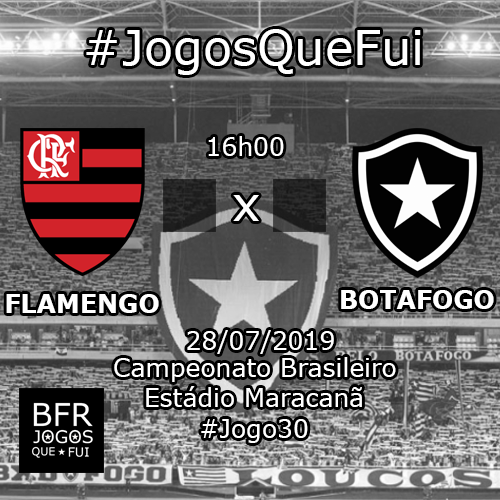
<style>
.page{position:relative;width:500px;height:500px}
.page>*{position:absolute;margin:0}
.t1{font:48px "Verdana";color:#ffffff}
.t2{font:25px "Verdana";color:#ffffff}
.t3{font:25px "Verdana-Bold";color:#ffffff}
</style>
<div class="page">
<p class="t1" style="left:86px;top:29px;width:335px;height:46px">#JogosQueFui</p>
<p class="t2" style="left:208px;top:136px;width:76px;height:20px">16h00</p>
<p class="t1" style="left:233px;top:195px;width:26px;height:26px">x</p>
<p class="t3" style="left:6px;top:294px;width:153px;height:19px">FLAMENGO</p>
<p class="t3" style="left:341px;top:290px;width:153px;height:19px">BOTAFOGO</p>
<p class="t2" style="left:187px;top:330px;width:147px;height:24px">28/07/2019</p>
<p class="t2" style="left:114px;top:357px;width:282px;height:25px">Campeonato Brasileiro</p>
<p class="t2" style="left:146px;top:386px;width:216px;height:21px">Estádio Maracanã</p>
<p class="t2" style="left:201px;top:419px;width:107px;height:24px">#Jogo30</p>
</div>
